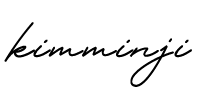
<style>
.page{position:relative;width:200px;height:100px;background:#ffffff}
.page>*{position:absolute;margin:0}
.t1{font:62.5px "Bellarina";letter-spacing:0.045em;color:#000000;scale:0.9 1}
</style>
<div class="page">
<p class="t1" style="left:4px;top:22px;width:188px;height:65px">kimminji</p>
</div>
